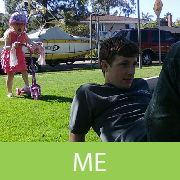
<style>
.page{position:relative;width:180px;height:180px;background:#97cc53}
.page>*{position:absolute;margin:0}
.t1{font:26.7px "MyriadPro-Regular";color:#faf7f7}
</style>
<div class="page">
<p class="t1" style="left:73px;top:153px;width:33px;height:18px">ME</p>
</div>
